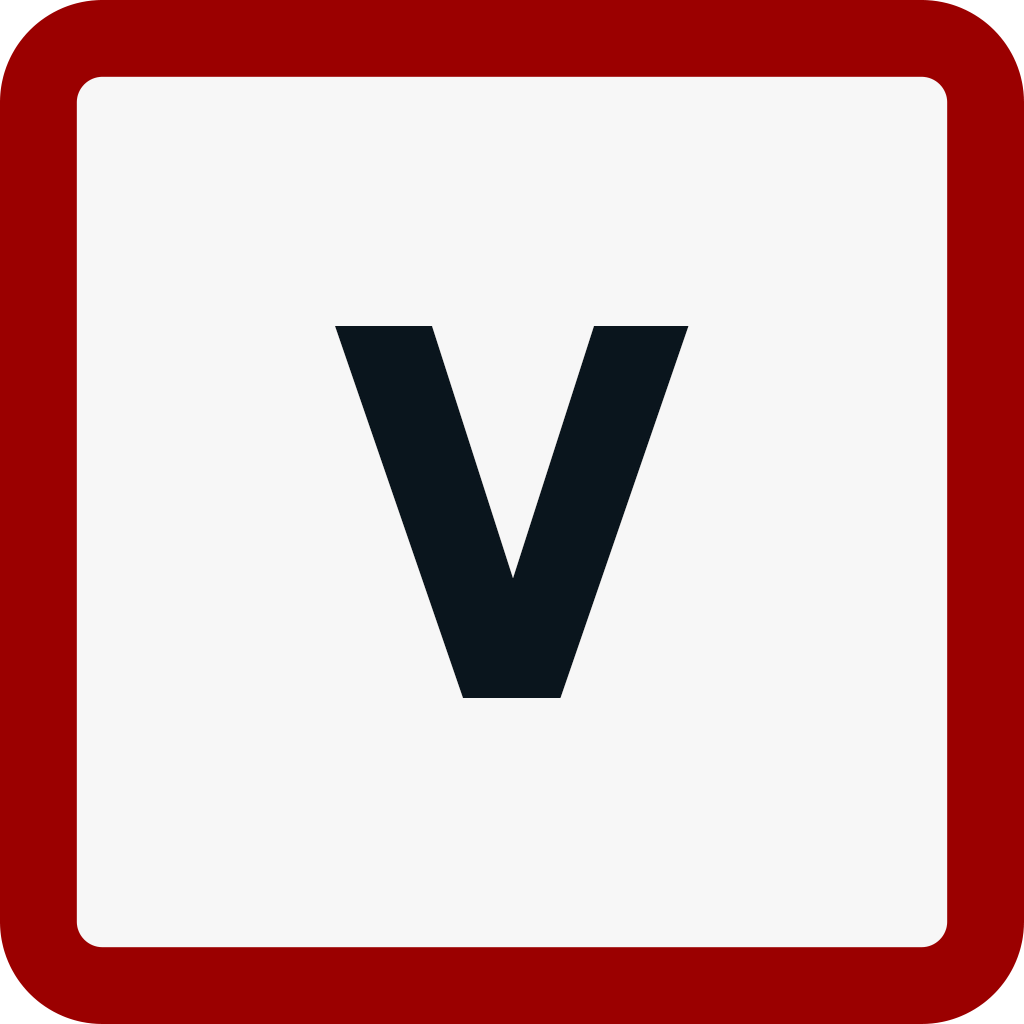
<style>
.page{position:relative;width:1024px;height:1024px;background:#f7f7f7}
.page>*{position:absolute;margin:0}
.t1{font:512px "Tahoma-Bold";letter-spacing:-0.03em;color:#0a151d}
</style>
<div class="page">
<p class="t1" style="left:335px;top:326px;width:354px;height:372px">V</p>
</div>
